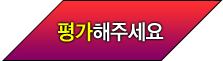
<style>
.page{position:relative;width:223px;height:61px;background:#ffffff}
.page>*{position:absolute;margin:0}
.t1{font:21.2px "YDIYGO330";letter-spacing:-0.025em;color:#ffffff;font-weight:bold;scale:0.91 1}
.t2{font:21.2px "YDIYGO330";letter-spacing:-0.025em;color:#fcff00;font-weight:bold;scale:0.91 1}
</style>
<div class="page">
<p class="t1" style="left:58px;top:22px;width:106px;height:20px"><span class="t2">평가</span>해주세요</p>
</div>
